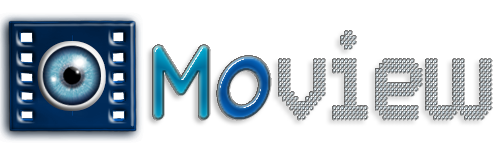
<style>
.page{position:relative;width:500px;height:150px;background:#ffffff}
.page>*{position:absolute;margin:0}
.t1{font:150px "Charlie-Dotted";scale:0.83 1}
.t2{font:105px "Odin-Bold";letter-spacing:-0.05em;font-weight:bold;scale:0.83 1}
.t3{font:135px "OdinRounded";letter-spacing:0.06em;font-style:italic;scale:0.83 1}
</style>
<div class="page">
<p class="t1" style="left:153px;top:31px;width:339px;height:89px"><span class="t2">M</span><span class="t3">o</span>view</p>
</div>
